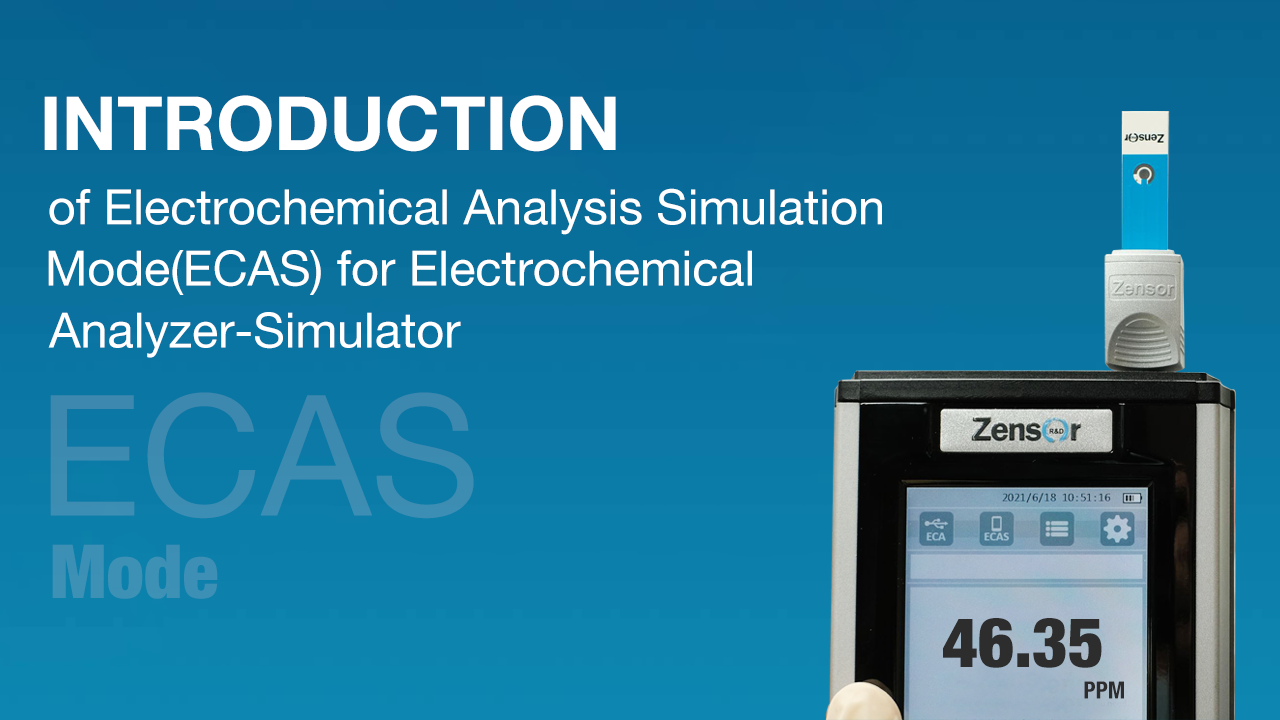
<style>
.page{position:relative;width:1280px;height:720px}
.page>*{position:absolute;margin:0}
.t1{font:74.5px "HelveticaNeue-Bold";color:#ffffff}
.t2{font:48.6px "HelveticaNeue";color:#ffffff}
.t3{font:168px "HelveticaNeue";color:#3d8cb1}
.t4{font:74.5px "HelveticaNeue-CondensedBlack";color:#3d90b5}
.t5{font:69.2px "HelveticaNeue-CondensedBlack";color:#2d2d2d}
.t6{font:23.7px "HelveticaNeue-CondensedBold";color:#2d2d2d}
</style>
<div class="page">
<p class="t1" style="left:44px;top:95px;width:572px;height:57px">INTRODUCTION</p>
<p class="t2" style="left:49px;top:188px;width:833px;height:47px">of Electrochemical Analysis Simulation</p>
<p class="t2" style="left:48px;top:250px;width:704px;height:45px">Mode(ECAS) for Electrochemical</p>
<p class="t2" style="left:48px;top:312px;width:413px;height:46px">Analyzer-Simulator</p>
<p class="t3" style="left:50px;top:392px;width:424px;height:127px">ECAS</p>
<p class="t4" style="left:52px;top:544px;width:166px;height:55px">Mode</p>
<p class="t5" style="left:943px;top:618px;width:159px;height:50px">46.35</p>
<p class="t6" style="left:1084px;top:681px;width:40px;height:18px">PPM</p>
</div>
